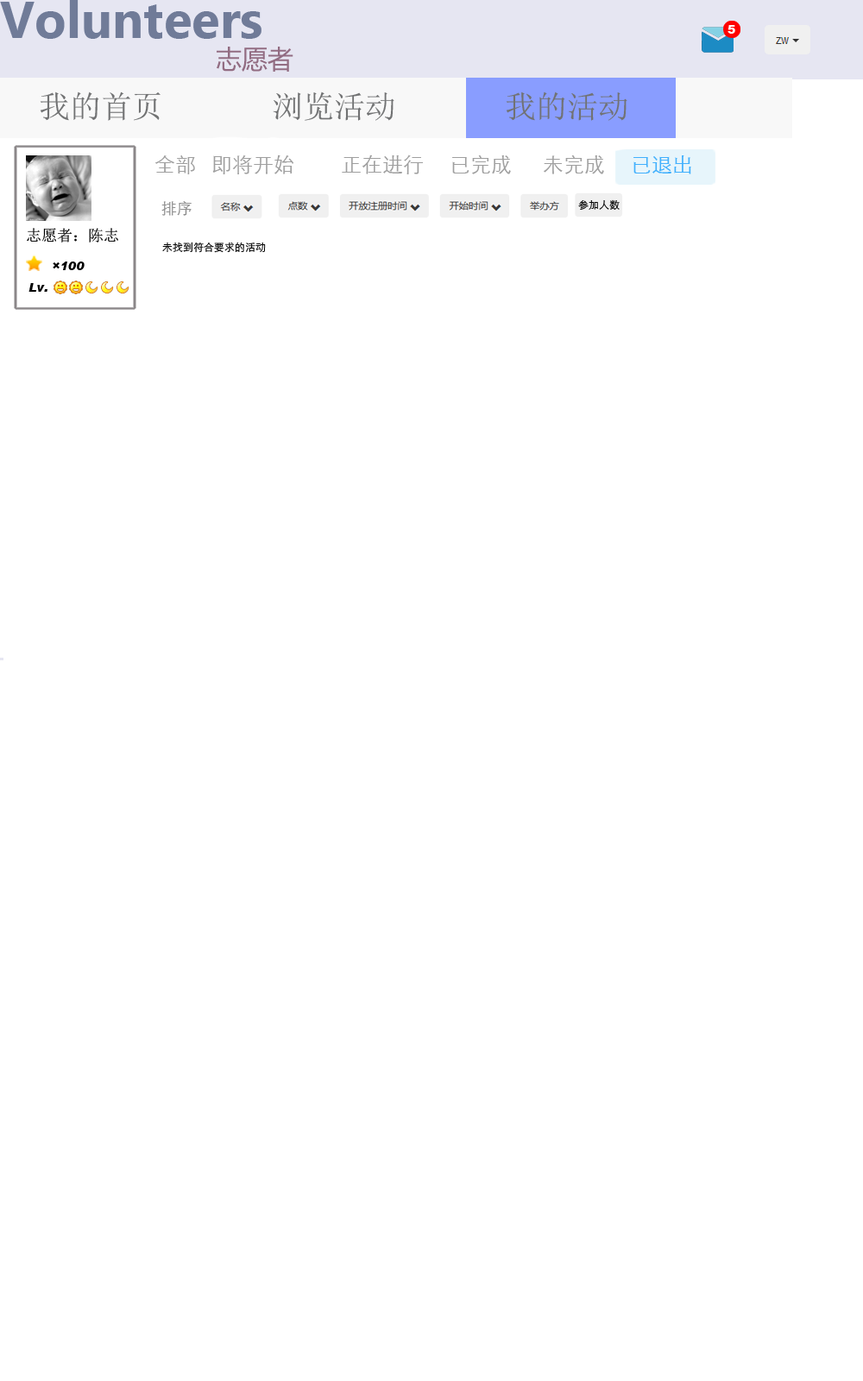
<style>
.page{position:relative;width:863px;height:1381px;background:#ffffff}
.page>*{position:absolute;margin:0}
.t1{font:12.1px "Arial-Black";color:#ffffff}
.t2{font:31.1px "SimSun";color:#717273}
.t3{font:20.7px "STXihei";color:#9f9f9f}
.t4{font:20.7px "STXihei";color:#41b0fd}
.t5{font:15.5px "STXihei";color:#8f8f8f}
.t6{font:10.4px "STXihei";color:#000000}
.t7{font:15.5px "SimSun";color:#000000}
.t8{font:12.1px "Arial-BlackItalic";color:#000000}
</style>
<div class="page">
<p class="t1" style="left:728px;top:25px;width:8px;height:9px">5</p>
<p class="t1" style="left:728px;top:25px;width:8px;height:9px">5</p>
<p class="t2" style="left:40px;top:92px;width:588px;height:29px">我的首页       浏览活动       我的活动</p>
<p class="t3" style="left:155px;top:155px;width:536px;height:19px">全部   即将开始         正在进行     已完成      未完成<span class="t4">     已退出</span></p>
<p class="t5" style="left:161px;top:201px;width:31px;height:15px">排序</p>
<p class="t6" style="left:578px;top:199px;width:42px;height:11px">参加人数</p>
<p class="t7" style="left:27px;top:228px;width:91px;height:15px">志愿者：陈志</p>
<p class="t6" style="left:162px;top:242px;width:104px;height:11px">未找到符合要求的活动</p>
<p class="t8" style="left:53px;top:262px;width:32px;height:8px">×100</p>
<p class="t8" style="left:28px;top:283px;width:19px;height:9px">Lv.</p>
</div>
